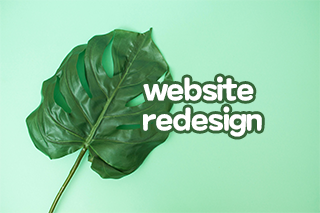
<style>
.page{position:relative;width:320px;height:213px}
.page>*{position:absolute;margin:0}
.t1{font:30px/30px "MaplestoryBold";letter-spacing:-0.025em;color:#ffffff}
</style>
<div class="page">
<p class="t1" style="left:143px;top:76px;width:119px;height:61px;text-align:center">website <br>redesign</p>
</div>
